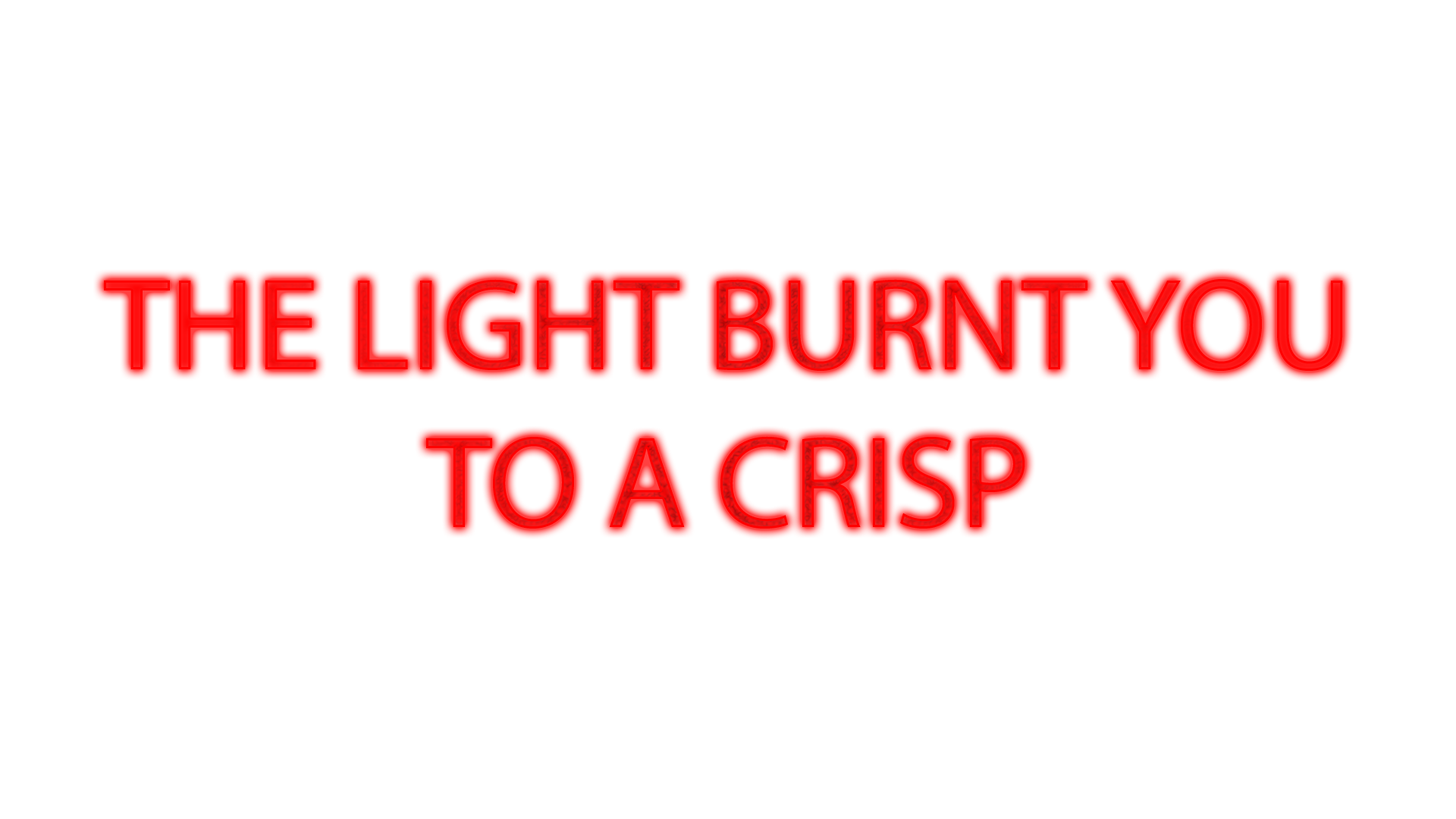
<style>
.page{position:relative;width:1456px;height:819px;background:#ffffff}
.page>*{position:absolute;margin:0}
.t1{font:132px "MyriadPro-Regular";color:#fe0000}
</style>
<div class="page">
<p class="t1" style="left:104px;top:279px;width:1239px;height:250px;text-align:center">THE LIGHT BURNT YOU<br>TO A CRISP</p>
</div>
